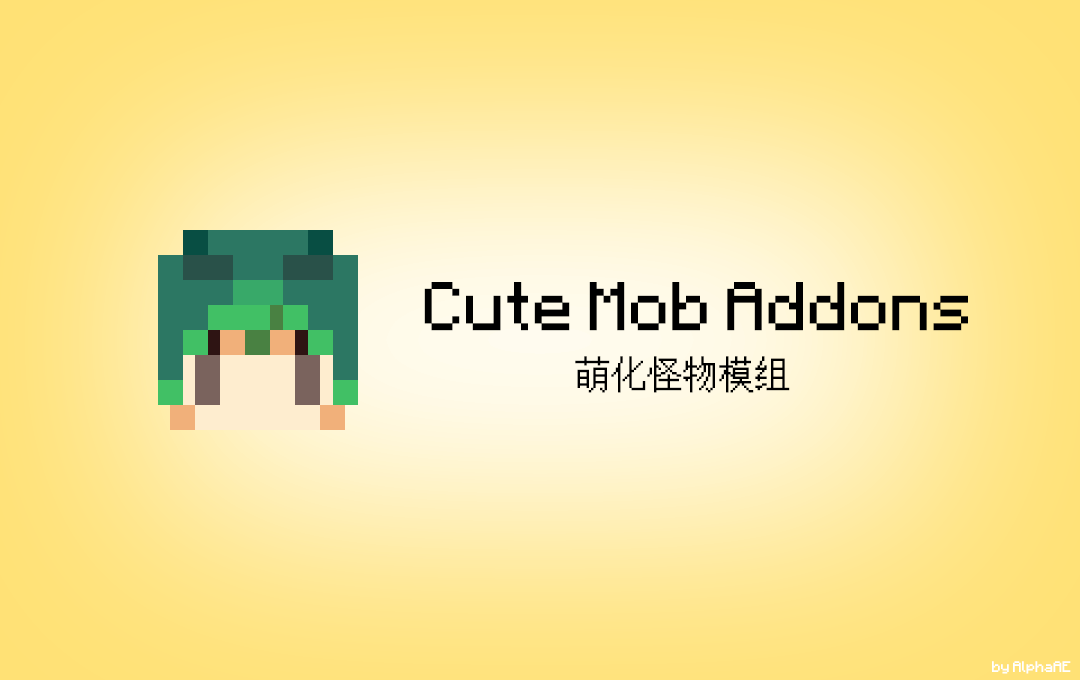
<style>
.page{position:relative;width:1080px;height:680px}
.page>*{position:absolute;margin:0}
.t1{font:55px "MinecraftAE-Pixel";color:#000000}
.t2{font:36px "MinecraftAE-Pixel";color:#000000}
.t3{font:12px "MinecraftAE-Pixel";color:#ffffff}
</style>
<div class="page">
<p class="t1" style="left:424px;top:282px;width:544px;height:49px">Cute Mob Addons</p>
<p class="t2" style="left:575px;top:356px;width:215px;height:37px">萌化怪物模组</p>
<p class="t3" style="left:992px;top:661px;width:79px;height:13px">by AlphaAE</p>
</div>
